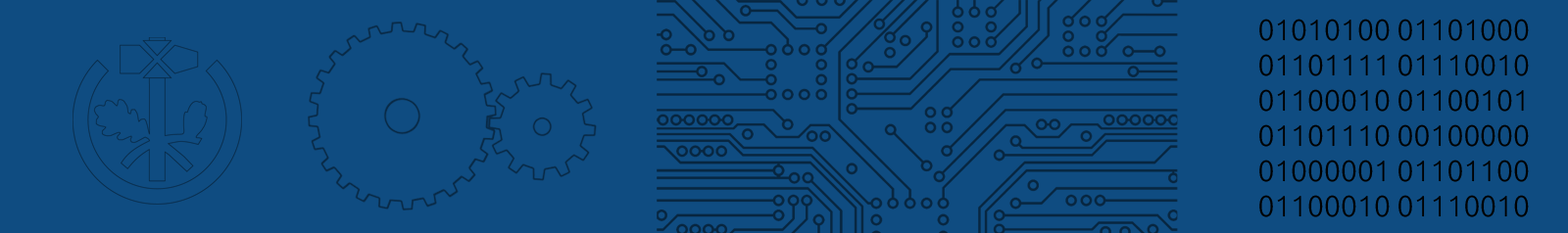
<style>
.page{position:relative;width:1568px;height:233px;background:#0f4c81}
.page>*{position:absolute;margin:0}
.t1{font:29.4px "Ubuntu-Light";color:#000000}
.t2{font:29.4px "Ubuntu-Bold";color:#000000}
.t3{font:29.4px "Ubuntu-Regular";color:#000000}
</style>
<div class="page">
<p class="t1" style="left:1259px;top:19px;width:270px;height:199px;text-align:center">01010100 01101000 01101111 01110010 01100010 01100101 01101110 00100000 01000001 01101100 01100010 01110010 <span class="t2">01100101 01100011</span><span class="t3"> 01101000 01110100</span></p>
</div>
